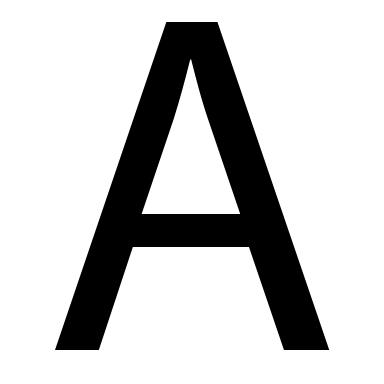
<style>
.page{position:relative;width:384px;height:384px;background:#ffffff}
.page>*{position:absolute;margin:0}
.t1{font:486.1px "MyriadPro-Regular";color:#000000}
</style>
<div class="page">
<p class="t1" style="left:55px;top:22px;width:275px;height:328px">A</p>
</div>
